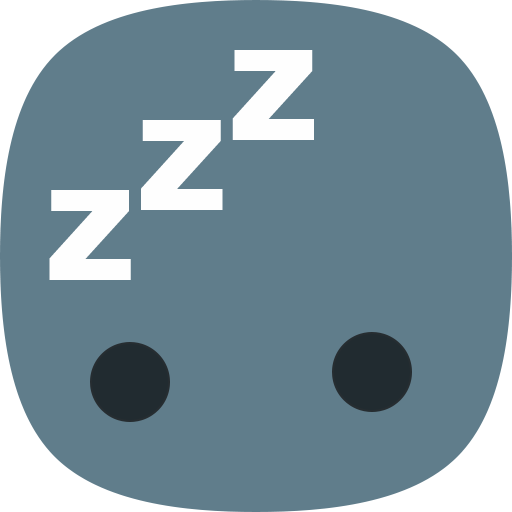
<style>
.page{position:relative;width:512px;height:512px;background:#607d8b}
.page>*{position:absolute;margin:0}
.t1{font:125px/70px "HelveticaLTStd-Blk";letter-spacing:0.4em;color:#fefefe}
</style>
<div class="page">
<p class="t1" style="left:49px;top:50px;width:265px;height:230px">Z<br> Z<br>Z</p>
</div>
